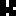
<style>
.page{position:relative;width:16px;height:16px;background:#000000}
.page>*{position:absolute;margin:0}
.t1{font:25px "I-pixel-u";color:#000000}
</style>
<div class="page">
<p class="t1" style="left:0px;top:0px;width:16px;height:16px">K</p>
</div>
